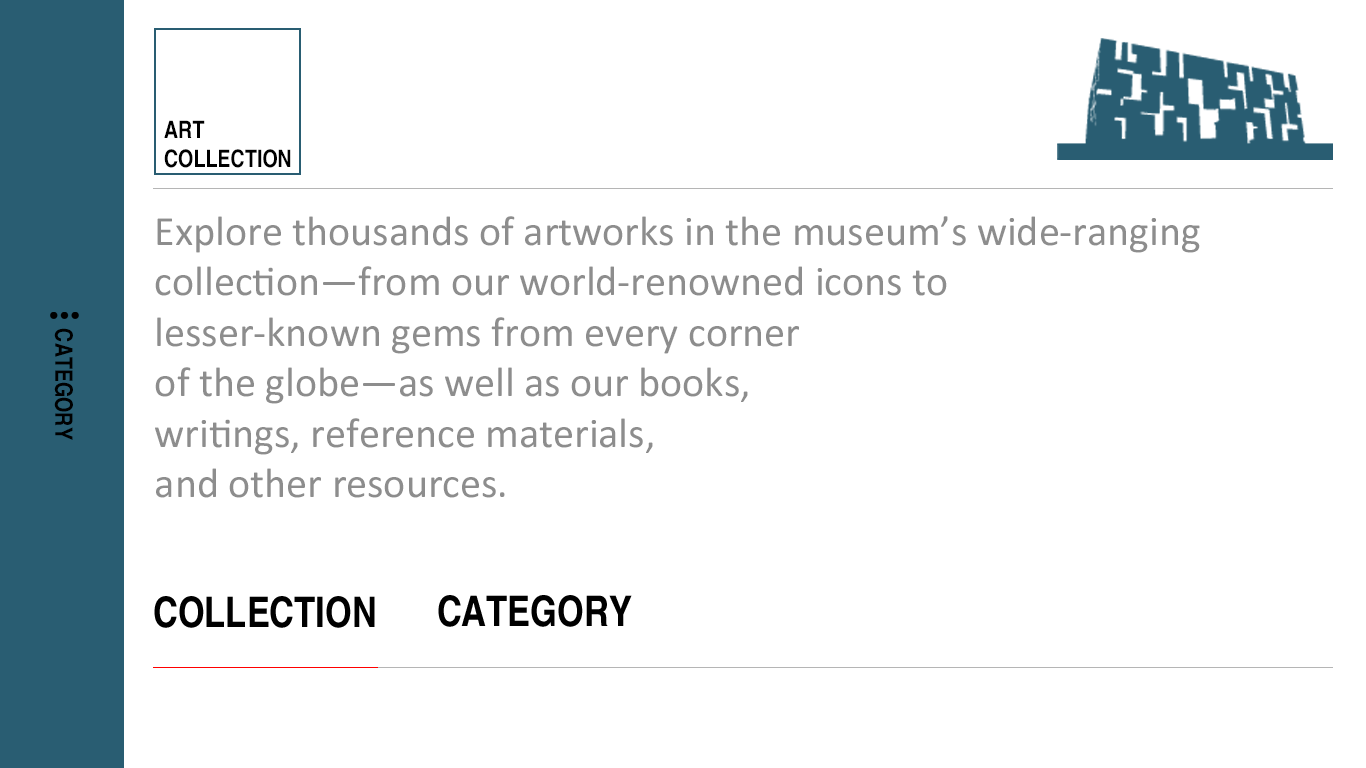
<style>
.page{position:relative;width:1366px;height:768px;background:#ffffff}
.page>*{position:absolute;margin:0}
.t1{font:24px "HelveticaLTPro-BdNarrow";color:#000000}
.t2{font:42px "Calibri";color:#8d8d8d}
</style>
<div class="page">
<p class="t1" style="left:164px;top:120px;width:127px;height:48px">ART<br>COLLECTION</p>
<p class="t2" style="left:155px;top:216px;width:1045px;height:282px">Explore thousands of artworks in the museum’s wide-ranging <br>collection—from our world-renowned icons to <br>lesser-known gems from every corner <br>of the globe—as well as our books, <br>writings, reference materials, <br>and other resources.</p>
</div>
